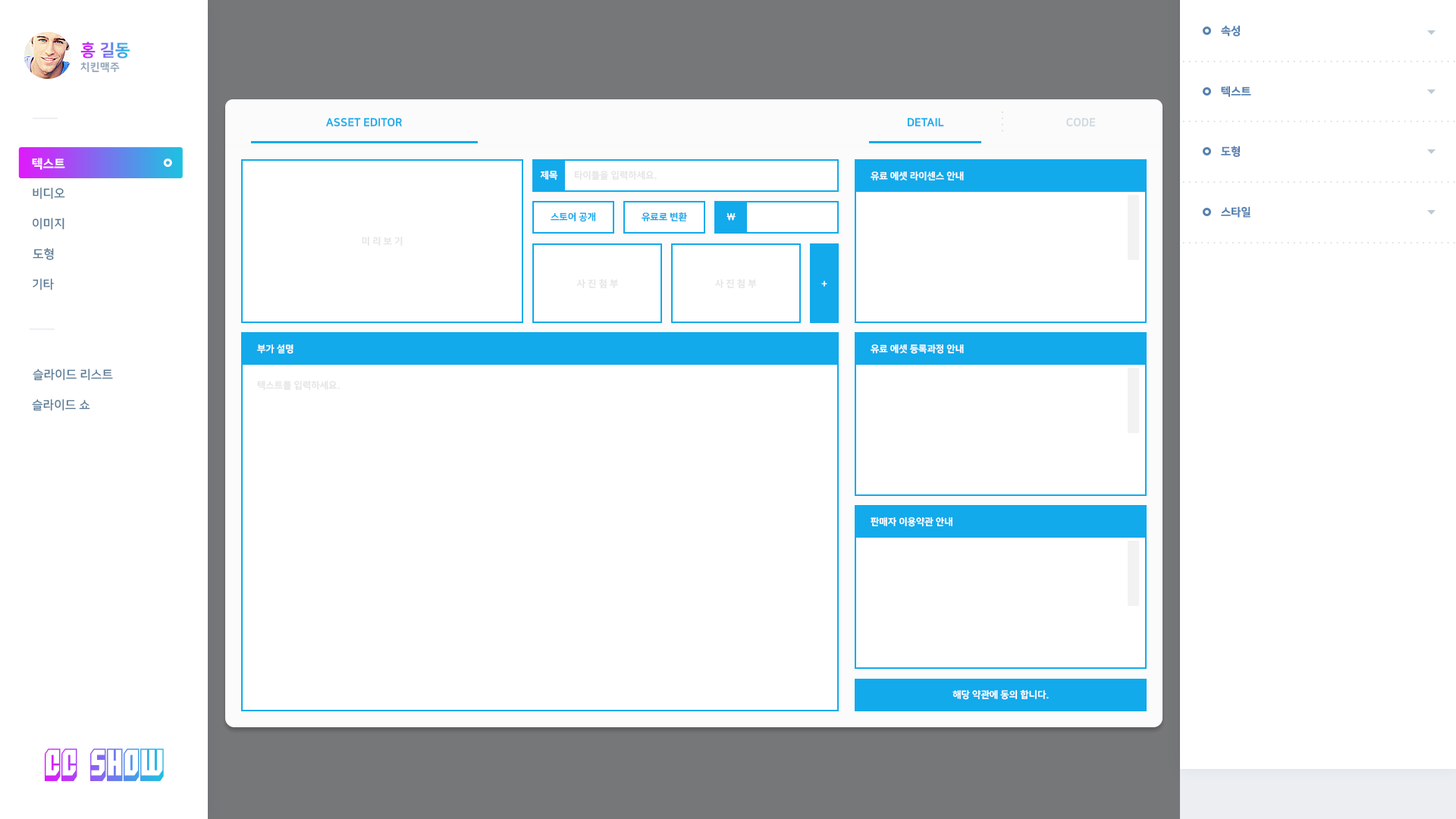
<style>
.page{position:relative;width:1456px;height:819px;background:#ffffff}
.page>*{position:absolute;margin:0}
.t1{font:11.1px "NanumSquareEB";color:#5682b2}
.t2{font:16.7px "NanumSquareEB";text-transform:uppercase}
.t3{font:10.6px "NanumSquareEB";letter-spacing:0.025em;color:#94a8ba;text-transform:uppercase}
.t4{font:11.1px "NanumSquareEB";color:#12aaeb;text-transform:uppercase}
.t5{font:11.1px "NanumSquareEB";color:#cfd9e0;text-transform:uppercase}
.t6{font:12.1px "NanumSquareEB";color:#ffffff;text-transform:uppercase}
.t7{font:9.5px "NanumSquareEB";color:#ffffff;text-transform:uppercase}
.t8{font:9.5px "NanumSquareEB";color:#e5e5e5;text-transform:uppercase}
.t9{font:12.1px "NanumSquareB";color:#597a96;text-transform:uppercase}
.t10{font:9.5px "NanumSquareEB";color:#12aaeb;text-transform:uppercase}
.t11{font:31.6px "Blockt"}
</style>
<div class="page">
<p class="t1" style="left:1221px;top:25px;width:19px;height:11px">속성</p>
<p class="t2" style="left:80px;top:42px;width:50px;height:16px">홍 길동</p>
<p class="t3" style="left:80px;top:61px;width:40px;height:12px">치킨맥주</p>
<p class="t1" style="left:1221px;top:86px;width:30px;height:11px">텍스트</p>
<p class="t4" style="left:326px;top:118px;width:76px;height:9px">Asset EDITOR</p>
<p class="t4" style="left:907px;top:118px;width:37px;height:9px">DETAIL</p>
<p class="t5" style="left:1066px;top:118px;width:30px;height:9px">CODE</p>
<p class="t1" style="left:1221px;top:146px;width:19px;height:11px">도형</p>
<p class="t6" style="left:32px;top:158px;width:33px;height:12px">텍스트</p>
<p class="t7" style="left:540px;top:171px;width:18px;height:9px">제목</p>
<p class="t8" style="left:574px;top:171px;width:83px;height:9px">타이틀을 입력하세요.</p>
<p class="t7" style="left:871px;top:171px;width:93px;height:9px">유료 에셋 라이센스 안내</p>
<p class="t9" style="left:33px;top:187px;width:32px;height:12px">비디오</p>
<p class="t1" style="left:1221px;top:206px;width:29px;height:12px">스타일</p>
<p class="t9" style="left:33px;top:218px;width:31px;height:12px">이미지</p>
<p class="t10" style="left:551px;top:212px;width:45px;height:10px">스토어 공개</p>
<p class="t10" style="left:642px;top:212px;width:45px;height:9px">유료로 변환</p>
<p class="t7" style="left:726px;top:213px;width:10px;height:8px">\</p>
<p class="t8" style="left:362px;top:237px;width:41px;height:9px">미 리 보 기</p>
<p class="t9" style="left:33px;top:248px;width:21px;height:12px">도형</p>
<p class="t9" style="left:33px;top:278px;width:21px;height:12px">기타</p>
<p class="t8" style="left:576px;top:278px;width:43px;height:10px">사 진 첨 부</p>
<p class="t8" style="left:715px;top:278px;width:42px;height:10px">사 진 첨 부</p>
<p class="t7" style="left:821px;top:281px;width:6px;height:6px">+</p>
<p class="t7" style="left:257px;top:344px;width:36px;height:10px">부가 설명</p>
<p class="t7" style="left:871px;top:344px;width:93px;height:10px">유료 에셋 등록과정 안내</p>
<p class="t9" style="left:33px;top:369px;width:80px;height:12px">슬라이드 리스트</p>
<p class="t8" style="left:257px;top:381px;width:83px;height:10px">텍스트를 입력하세요.</p>
<p class="t9" style="left:32px;top:399px;width:58px;height:12px">슬라이드 쇼</p>
<p class="t7" style="left:871px;top:517px;width:81px;height:10px">판매자 이용약관 안내</p>
<p class="t7" style="left:952px;top:689px;width:97px;height:11px">해당 약관에 동의 합니다.</p>
<p class="t11" style="left:44px;top:748px;width:120px;height:34px">CC SHOW</p>
</div>
